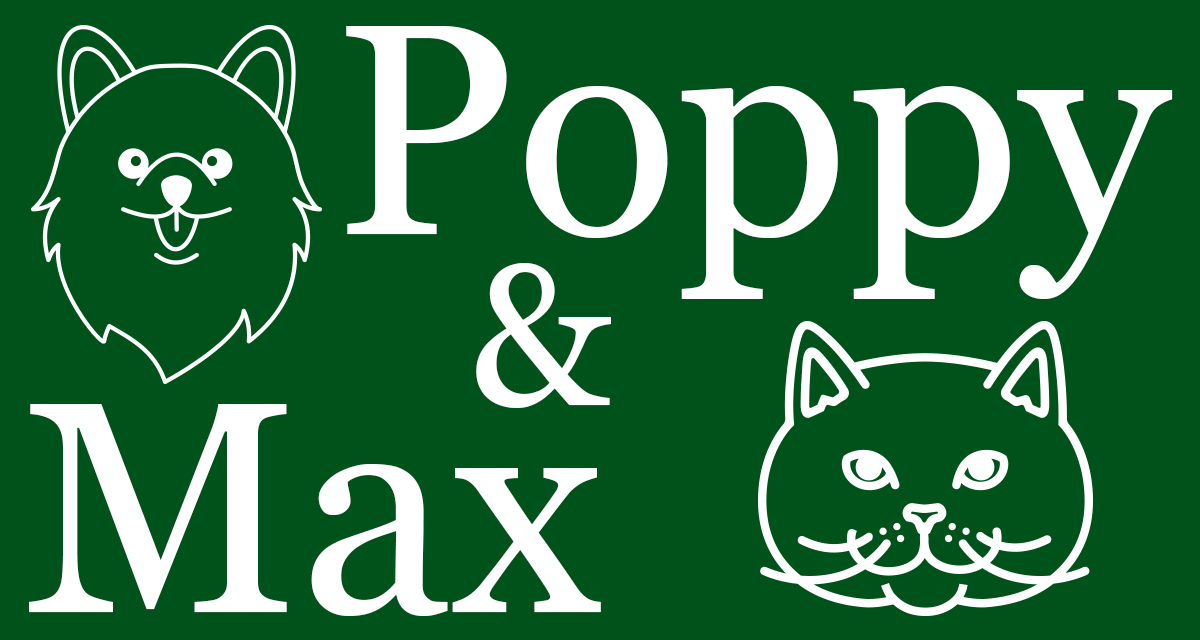
<style>
.page{position:relative;width:1200px;height:640px;background:#00521b}
.page>*{position:absolute;margin:0}
.t1{font:300px "Georgia";color:#ffffff}
.t2{font:200px "Georgia";color:#ffffff}
</style>
<div class="page">
<p class="t1" style="left:346px;top:26px;width:827px;height:273px">Poppy</p>
<p class="t2" style="left:476px;top:263px;width:135px;height:145px">&amp;</p>
<p class="t1" style="left:29px;top:404px;width:572px;height:212px">Max</p>
</div>
